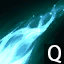
<style>
.page{position:relative;width:64px;height:64px}
.page>*{position:absolute;margin:0}
.t1{font:20px "AdobeFanHeitiStd-Bold";color:#ffffff}
</style>
<div class="page">
<p class="t1" style="left:48px;top:45px;width:14px;height:18px">Q</p>
</div>
